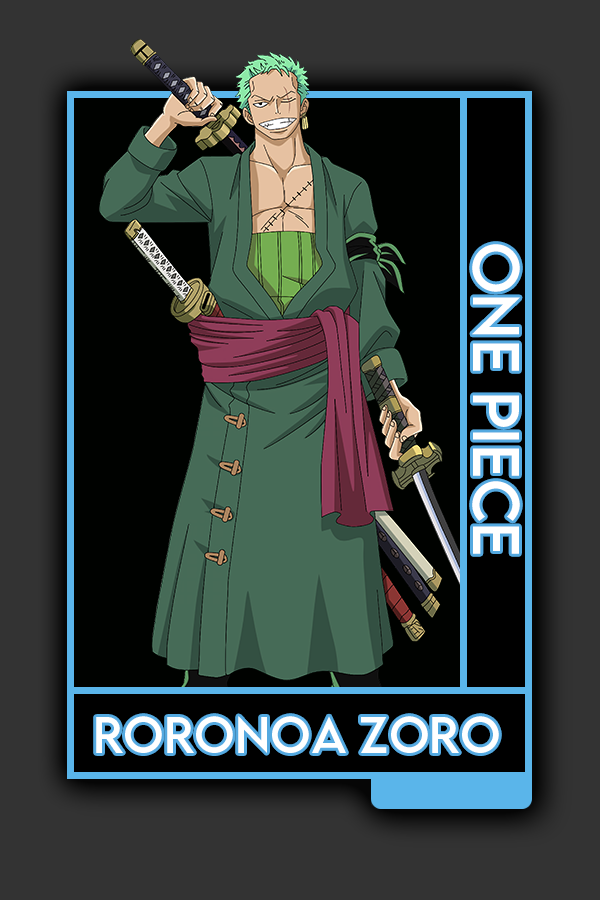
<style>
.page{position:relative;width:600px;height:900px;background:#333333}
.page>*{position:absolute;margin:0}
.t1{font:58.4px "LEMONMILK-Regular";color:#ffffff}
.t2{font:45.6px "LEMONMILK-Regular";color:#ffffff}
</style>
<div class="page">
<p class="t1" style="left:472px;top:244px;width:48px;height:310px;rotate:90deg">One Piece</p>
<p class="t2" style="left:96px;top:716px;width:403px;height:37px">Roronoa Zoro</p>
</div>
